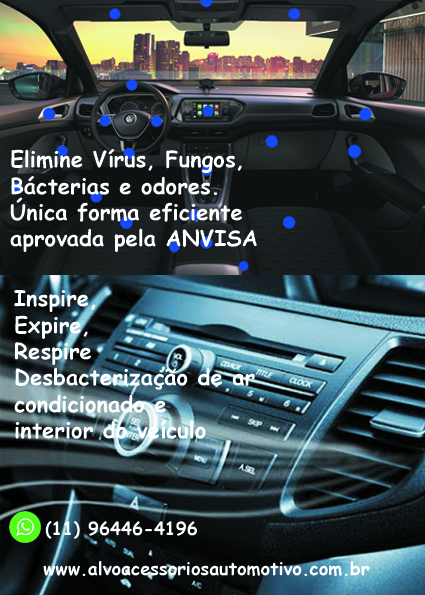
<style>
.page{position:relative;width:425px;height:595px}
.page>*{position:absolute;margin:0}
.t1{font:22px "ComicSansMS-Bold";color:#feffff}
.t2{font:18px "ComicSansMS-Bold";color:#feffff}
</style>
<div class="page">
<p class="t1" style="left:10px;top:149px;width:247px;height:103px">Elimine Vírus, Fungos, Bácterias e odores.<br>Única forma eficiente<br>aprovada pela ANVISA</p>
<p class="t1" style="left:14px;top:290px;width:241px;height:149px">Inspire,<br>Expire,<br>Respire<br>Desbacterização de ar<br>condicionado e <br>interior do veículo</p>
<p class="t2" style="left:45px;top:521px;width:152px;height:18px">(11) 96446-4196</p>
<p class="t2" style="left:43px;top:561px;width:327px;height:15px">www.alvoacessoriosautomotivo.com.br</p>
</div>
